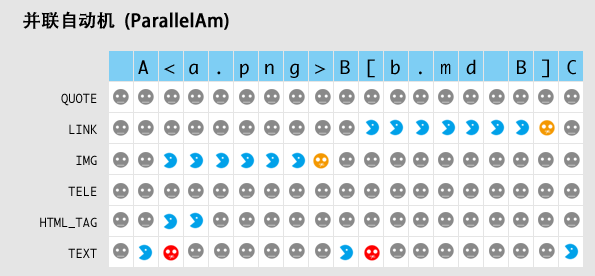
<style>
.page{position:relative;width:595px;height:276px;background:#e5e5e5}
.page>*{position:absolute;margin:0}
.t1{font:18px "AdobeHeitiStd-Regular";color:#000000;font-weight:bold}
.t2{font:18px "Monaco";letter-spacing:0.8em;color:#000000}
.t3{font:12px/31px "Monaco";color:#000000}
</style>
<div class="page">
<p class="t1" style="left:23px;top:11px;width:206px;height:19px">并联自动机  (ParallelAm)</p>
<p class="t2" style="left:138px;top:59px;width:438px;height:19px">A&lt;a.png&gt;B[b.md B]C</p>
<p class="t3" style="left:40px;top:93px;width:57px;height:165px;text-align:right">QUOTE<br>LINK<br>IMG<br>TELE<br>HTML_TAG<br>TEXT</p>
</div>
